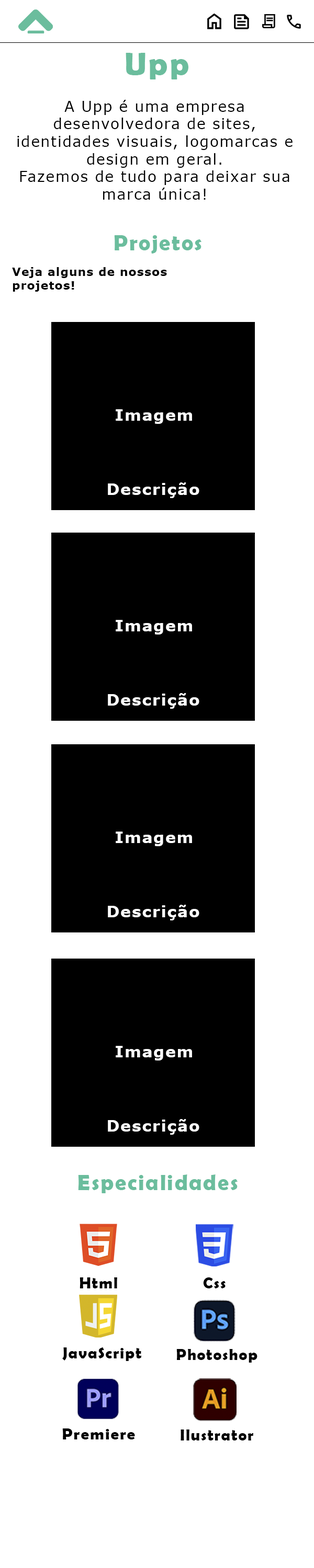
<style>
.page{position:relative;width:314px;height:1568px;background:#ffffff}
.page>*{position:absolute;margin:0}
.t1{font:32.3px "BerlinSansFBDemi-Bold";letter-spacing:0.06em;color:#6bbd9d}
.t2{font:14.7px "Verdana";letter-spacing:0.06em;color:#000000}
.t3{font:22.1px "BerlinSansFBDemi-Bold";letter-spacing:0.06em;color:#6bbd9d}
.t4{font:11.3px "Verdana-Bold";letter-spacing:0.06em;color:#000000}
.t5{font:15.7px "BerlinSansFBDemi-Bold";letter-spacing:0.06em;color:#000000}
.t6{font:16.3px "BerlinSansFBDemi-Bold";letter-spacing:0.06em;color:#000000}
</style>
<div class="page">
<p class="t1" style="left:125px;top:53px;width:63px;height:26px">Upp</p>
<p class="t2" style="left:17px;top:100px;width:275px;height:100px;text-align:center">A Upp é uma empresa desenvolvedora de sites, identidades visuais, logomarcas e design em geral.<br>Fazemos de tudo para deixar sua marca única!</p>
<p class="t3" style="left:114px;top:235px;width:87px;height:18px">Projetos</p>
<p class="t4" style="left:12px;top:267px;width:155px;height:25px">Veja alguns de nossos projetos!</p>
<p class="t3" style="left:78px;top:1174px;width:159px;height:19px">Especialidades</p>
<p class="t5" style="left:79px;top:1277px;width:38px;height:11px">Html</p>
<p class="t5" style="left:203px;top:1277px;width:22px;height:11px">Css</p>
<p class="t5" style="left:62px;top:1347px;width:79px;height:14px">JavaScript</p>
<p class="t5" style="left:176px;top:1349px;width:81px;height:14px">Photoshop</p>
<p class="t6" style="left:62px;top:1428px;width:73px;height:11px">Premiere</p>
<p class="t5" style="left:180px;top:1429px;width:73px;height:11px">Ilustrator</p>
</div>
